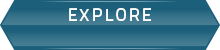
<style>
.page{position:relative;width:220px;height:50px;background:#1b5f7a}
.page>*{position:absolute;margin:0}
.t1{font:18px "TitilliumText22L-Medium";letter-spacing:0.1em;color:#ffffff}
</style>
<div class="page">
<p class="t1" style="left:69px;top:8px;width:82px;height:13px">EXPLORE</p>
</div>
